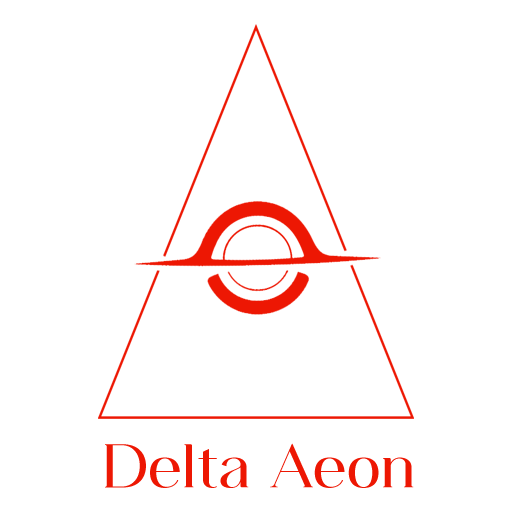
<style>
.page{position:relative;width:512px;height:512px;background:#ffffff}
.page>*{position:absolute;margin:0}
.t1{font:61.5px "ClassyVogueRegular";color:#ed1703;scale:1.04 1}
</style>
<div class="page">
<p class="t1" style="left:105px;top:443px;width:309px;height:45px">Delta Aeon</p>
</div>
